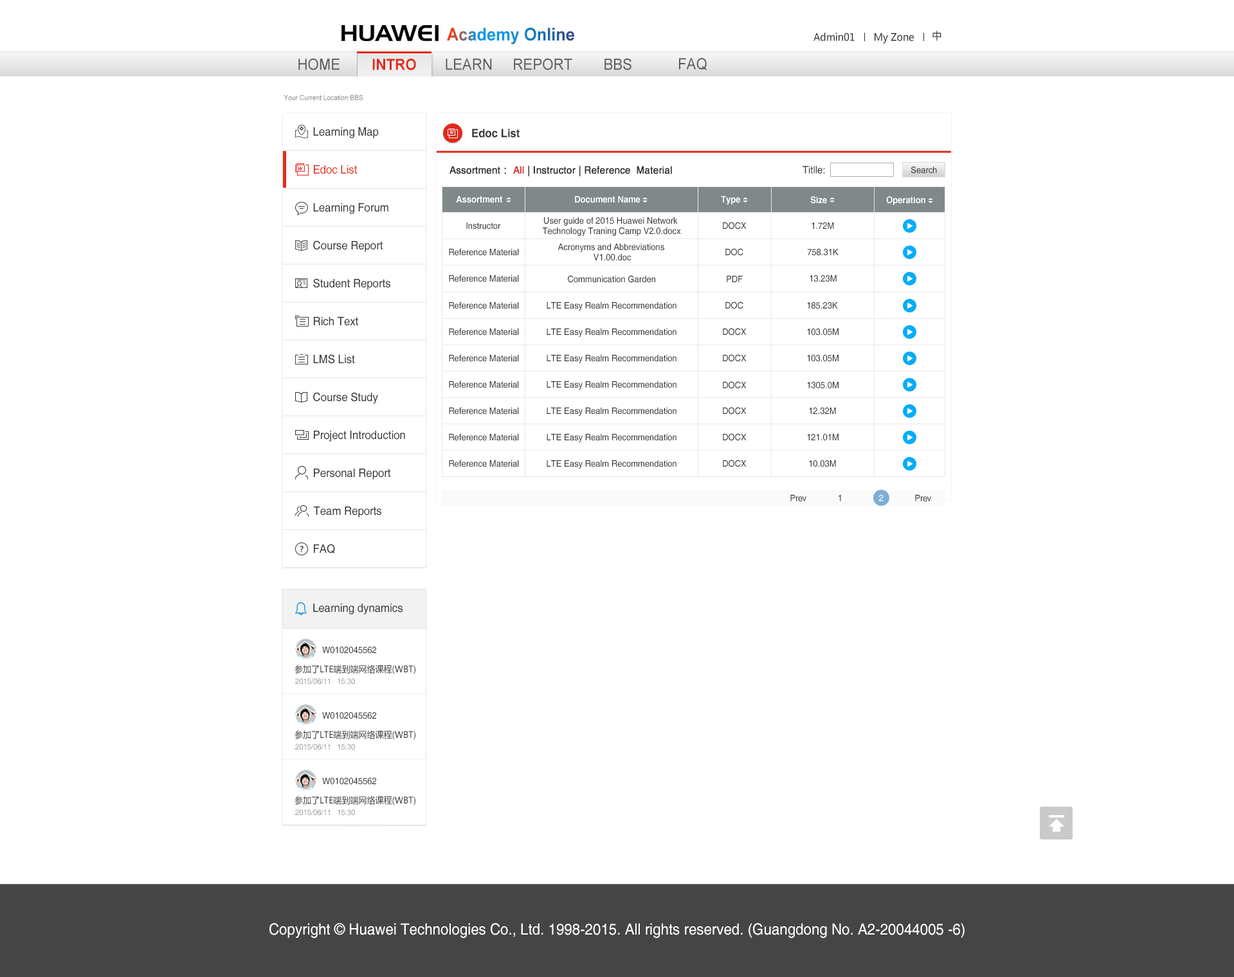
<style>
.page{position:relative;width:1234px;height:977px;background:#ffffff}
.page>*{position:absolute;margin:0}
.t1{font:17.6px "Arial-BoldMT";scale:0.93 1}
.t2{font:10.3px "MicrosoftYaHei";color:#2a2a2a;scale:0.93 1}
.t3{font:15.4px "ArialMT";color:#585858;scale:0.93 1}
.t4{font:15.4px "Arial-BoldMT";color:#e2291c;scale:0.93 1}
.t5{font:7.1px "ArialMT";color:#8d8d8d;scale:0.93 1}
.t6{font:11.6px "Helvetica";color:#333333;scale:0.93 1}
.t7{font:11.6px "Helvetica-Bold";color:#333333;scale:0.93 1}
.t8{font:11.6px "Helvetica";color:#e2291c;scale:0.93 1}
.t9{font:10.3px "Helvetica";color:#333333;font-weight:bold;scale:0.93 1}
.t10{font:10.3px "MicrosoftYaHei";color:#333333;font-weight:bold;scale:0.93 1}
.t11{font:10.3px "Helvetica";color:#e2291c;font-weight:bold;scale:0.93 1}
.t12{font:10.3px "Helvetica";color:#333333;scale:0.93 1}
.t13{font:9px "Helvetica";color:#333333;scale:0.93 1}
.t14{font:9px "Helvetica-Bold";color:#ffffff;scale:0.93 1}
.t15{font:9px/10.3px "Helvetica";color:#333333;scale:0.93 1}
.t16{font:9px "Helvetica";letter-spacing:-0.025em;color:#333333;scale:0.93 1}
.t17{font:9px "Helvetica";letter-spacing:-0.025em;color:#ffffff;scale:0.93 1}
.t18{font:9px "MicrosoftYaHei";color:#333333;scale:0.93 1}
.t19{font:7.7px "Helvetica";color:#9a9a9a;scale:0.93 1}
.t20{font:15.4px "Helvetica";color:#fffefe;scale:0.93 1}
</style>
<div class="page">
<p class="t1" style="left:447px;top:28px;width:127px;height:16px">Academy Online</p>
<p class="t2" style="left:813px;top:32px;width:41px;height:9px">Admin01</p>
<p class="t2" style="left:874px;top:33px;width:40px;height:11px">My Zone</p>
<p class="t2" style="left:932px;top:30px;width:9px;height:11px">中</p>
<p class="t3" style="left:298px;top:59px;width:41px;height:11px">HOME</p>
<p class="t4" style="left:372px;top:59px;width:44px;height:11px">INTRO</p>
<p class="t3" style="left:446px;top:59px;width:46px;height:11px">LEARN</p>
<p class="t3" style="left:514px;top:59px;width:58px;height:11px">REPORT</p>
<p class="t3" style="left:604px;top:59px;width:27px;height:11px">BBS</p>
<p class="t3" style="left:679px;top:58px;width:27px;height:12px">FAQ</p>
<p class="t5" style="left:284px;top:94px;width:79px;height:6px">Your Current Location:BBS</p>
<p class="t6" style="left:313px;top:127px;width:66px;height:11px">Learning Map</p>
<p class="t7" style="left:472px;top:129px;width:47px;height:9px">Edoc List</p>
<p class="t8" style="left:314px;top:165px;width:43px;height:9px">Edoc List</p>
<p class="t9" style="left:449px;top:166px;width:223px;height:11px">Assortment<span class="t10">： </span><span class="t11">All</span> | Instructor | Reference  Material</p>
<p class="t12" style="left:802px;top:166px;width:23px;height:8px">Titlle:</p>
<p class="t13" style="left:910px;top:166px;width:27px;height:8px">Search</p>
<p class="t14" style="left:456px;top:196px;width:46px;height:7px">Assortment</p>
<p class="t14" style="left:575px;top:196px;width:65px;height:7px">Document Name</p>
<p class="t14" style="left:721px;top:196px;width:19px;height:8px">Type</p>
<p class="t14" style="left:810px;top:196px;width:17px;height:8px">Size</p>
<p class="t14" style="left:886px;top:196px;width:39px;height:9px">Operation</p>
<p class="t6" style="left:313px;top:203px;width:75px;height:11px">Learning Forum</p>
<p class="t15" style="left:542px;top:217px;width:139px;height:19px;text-align:center">User guide of 2015 Huawei Network <br>Technology Traning Camp V2.0.docx</p>
<p class="t13" style="left:723px;top:222px;width:23px;height:8px">DOCX</p>
<p class="t13" style="left:466px;top:222px;width:35px;height:8px">Instructor</p>
<p class="t13" style="left:811px;top:222px;width:23px;height:7px">1.72M</p>
<p class="t6" style="left:313px;top:240px;width:70px;height:12px">Course Report</p>
<p class="t15" style="left:557px;top:244px;width:107px;height:17px;text-align:center">Acronyms and Abbreviations <br>V1.00.doc</p>
<p class="t13" style="left:449px;top:248px;width:70px;height:8px">Reference Material</p>
<p class="t13" style="left:725px;top:248px;width:18px;height:8px">DOC</p>
<p class="t13" style="left:807px;top:249px;width:31px;height:7px">758.31K</p>
<p class="t6" style="left:313px;top:278px;width:77px;height:12px">Student Reports</p>
<p class="t13" style="left:449px;top:274px;width:70px;height:8px">Reference Material</p>
<p class="t13" style="left:568px;top:275px;width:87px;height:8px">Communication Garden</p>
<p class="t13" style="left:726px;top:276px;width:16px;height:6px">PDF</p>
<p class="t13" style="left:809px;top:275px;width:27px;height:7px">13.23M</p>
<p class="t13" style="left:449px;top:302px;width:70px;height:7px">Reference Material</p>
<p class="t13" style="left:546px;top:302px;width:130px;height:8px">LTE Easy Realm Recommendation</p>
<p class="t13" style="left:725px;top:302px;width:18px;height:7px">DOC</p>
<p class="t13" style="left:807px;top:302px;width:31px;height:7px">185.23K</p>
<p class="t6" style="left:314px;top:317px;width:44px;height:9px">Rich Text</p>
<p class="t13" style="left:449px;top:328px;width:70px;height:8px">Reference Material</p>
<p class="t13" style="left:546px;top:328px;width:130px;height:9px">LTE Easy Realm Recommendation</p>
<p class="t13" style="left:723px;top:328px;width:23px;height:8px">DOCX</p>
<p class="t13" style="left:807px;top:328px;width:31px;height:8px">103.05M</p>
<p class="t6" style="left:313px;top:354px;width:42px;height:10px">LMS List</p>
<p class="t13" style="left:449px;top:354px;width:70px;height:8px">Reference Material</p>
<p class="t13" style="left:546px;top:355px;width:130px;height:8px">LTE Easy Realm Recommendation</p>
<p class="t13" style="left:723px;top:354px;width:23px;height:8px">DOCX</p>
<p class="t13" style="left:807px;top:355px;width:31px;height:7px">103.05M</p>
<p class="t13" style="left:449px;top:381px;width:70px;height:7px">Reference Material</p>
<p class="t13" style="left:546px;top:381px;width:130px;height:9px">LTE Easy Realm Recommendation</p>
<p class="t13" style="left:723px;top:381px;width:23px;height:8px">DOCX</p>
<p class="t13" style="left:807px;top:382px;width:31px;height:7px">1305.0M</p>
<p class="t6" style="left:313px;top:392px;width:65px;height:12px">Course Study</p>
<p class="t13" style="left:449px;top:407px;width:70px;height:8px">Reference Material</p>
<p class="t13" style="left:546px;top:408px;width:130px;height:8px">LTE Easy Realm Recommendation</p>
<p class="t13" style="left:723px;top:407px;width:23px;height:8px">DOCX</p>
<p class="t13" style="left:809px;top:408px;width:27px;height:7px">12.32M</p>
<p class="t6" style="left:314px;top:431px;width:91px;height:11px">Project Introduction</p>
<p class="t13" style="left:449px;top:433px;width:70px;height:8px">Reference Material</p>
<p class="t13" style="left:546px;top:434px;width:130px;height:8px">LTE Easy Realm Recommendation</p>
<p class="t13" style="left:723px;top:433px;width:23px;height:8px">DOCX</p>
<p class="t13" style="left:807px;top:434px;width:31px;height:7px">121.01M</p>
<p class="t13" style="left:449px;top:460px;width:70px;height:7px">Reference Material</p>
<p class="t13" style="left:546px;top:460px;width:130px;height:9px">LTE Easy Realm Recommendation</p>
<p class="t13" style="left:723px;top:460px;width:23px;height:7px">DOCX</p>
<p class="t13" style="left:809px;top:460px;width:27px;height:7px">10.03M</p>
<p class="t6" style="left:314px;top:469px;width:77px;height:11px">Personal Report</p>
<p class="t16" style="left:790px;top:494px;width:16px;height:7px">Prev</p>
<p class="t16" style="left:838px;top:494px;width:3px;height:7px">1</p>
<p class="t17" style="left:879px;top:494px;width:4px;height:7px">2</p>
<p class="t16" style="left:915px;top:494px;width:16px;height:7px">Prev</p>
<p class="t6" style="left:313px;top:507px;width:68px;height:11px">Team Reports</p>
<p class="t6" style="left:314px;top:544px;width:21px;height:10px">FAQ</p>
<p class="t6" style="left:313px;top:604px;width:89px;height:11px">Learning dynamics</p>
<p class="t13" style="left:322px;top:647px;width:54px;height:7px">W0102045562</p>
<p class="t18" style="left:294px;top:665px;width:121px;height:9px">参加了LTE端到端网络课程(WBT)</p>
<p class="t19" style="left:295px;top:678px;width:60px;height:7px">2015/06/11   15:30</p>
<p class="t13" style="left:322px;top:712px;width:54px;height:7px">W0102045562</p>
<p class="t18" style="left:294px;top:730px;width:121px;height:10px">参加了LTE端到端网络课程(WBT)</p>
<p class="t19" style="left:295px;top:744px;width:60px;height:6px">2015/06/11   15:30</p>
<p class="t13" style="left:322px;top:778px;width:54px;height:7px">W0102045562</p>
<p class="t18" style="left:294px;top:796px;width:121px;height:10px">参加了LTE端到端网络课程(WBT)</p>
<p class="t19" style="left:295px;top:809px;width:60px;height:7px">2015/06/11   15:30</p>
<p class="t20" style="left:269px;top:923px;width:695px;height:16px">Copyright © Huawei Technologies Co., Ltd. 1998-2015. All rights reserved. (Guangdong No. A2-20044005 -6)</p>
</div>
